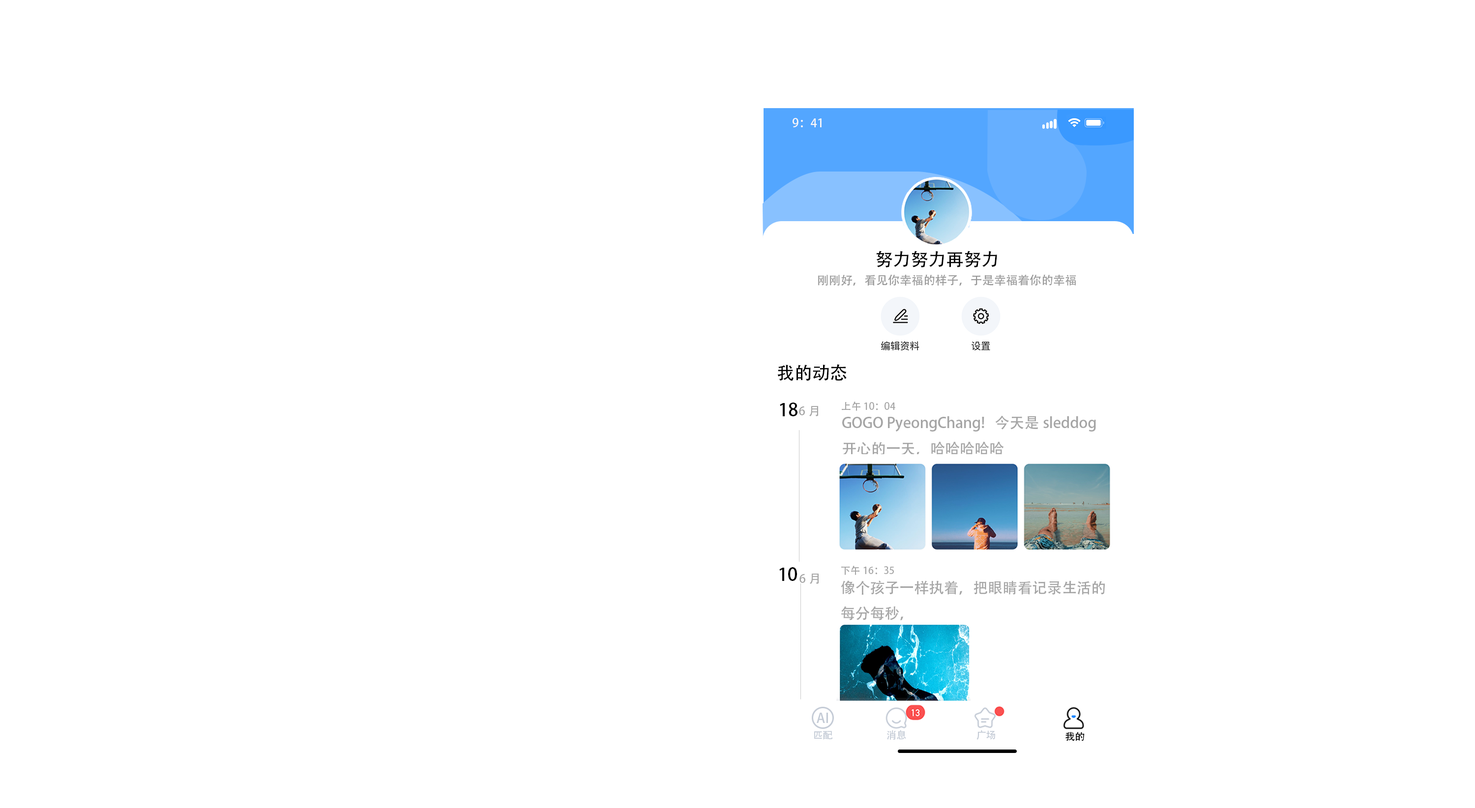
<style>
.page{position:relative;width:1475px;height:808px;background:#ffffff}
.page>*{position:absolute;margin:0}
.t1{font:11.8px "AdobeHeitiStd-Regular";color:#fbf7f7}
.t2{font:17.7px "AdobeHeitiStd-Regular";color:#000000}
.t3{font:11.8px "AdobeHeitiStd-Regular";color:#989898}
.t4{font:9.8px "AdobeHeitiStd-Regular";color:#a5a5a5}
.t5{font:11.8px "AdobeHeitiStd-Regular";color:#a5a5a5}
.t6{font:14.8px "AdobeHeitiStd-Regular";color:#a5a5a5}
.t7{font:13.5px "AdobeHeitiStd-Regular";color:#c4cbd6}
.t8{font:9.8px "AdobeHeitiStd-Regular";color:#c4cbd6}
.t9{font:9.8px "AdobeHeitiStd-Regular";color:#000000}
</style>
<div class="page">
<p class="t1" style="left:793px;top:118px;width:29px;height:9px">9：41</p>
<p class="t2" style="left:876px;top:251px;width:121px;height:16px">努力努力再努力</p>
<p class="t3" style="left:818px;top:274px;width:258px;height:12px">刚刚好，看见你幸福的样子，于是幸福着你的幸福</p>
<p class="t2" style="left:777px;top:364px;width:70px;height:17px">我的动态</p>
<p class="t4" style="left:842px;top:402px;width:53px;height:9px">上午10：04</p>
<p class="t2" style="left:780px;top:403px;width:18px;height:13px">18</p>
<p class="t5" style="left:799px;top:406px;width:19px;height:10px">6月</p>
<p class="t6" style="left:842px;top:416px;width:254px;height:40px">GOGO PyeongChang!   今天是sleddog<br>开心的一天，哈哈哈哈哈</p>
<p class="t2" style="left:779px;top:567px;width:18px;height:14px">10</p>
<p class="t4" style="left:841px;top:566px;width:53px;height:9px">下午16：35</p>
<p class="t5" style="left:800px;top:574px;width:19px;height:10px">6月</p>
<p class="t6" style="left:841px;top:581px;width:264px;height:40px">像个孩子一样执着，把眼睛看记录生活的<br>每分每秒，</p>
<p class="t7" style="left:817px;top:713px;width:11px;height:10px">AI</p>
<p class="t8" style="left:814px;top:731px;width:19px;height:9px">匹配</p>
<p class="t8" style="left:887px;top:730px;width:19px;height:10px">消息</p>
<p class="t8" style="left:977px;top:730px;width:18px;height:10px">广场</p>
<p class="t9" style="left:1066px;top:732px;width:19px;height:9px">我的</p>
</div>
